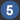
<style>
.page{position:relative;width:20px;height:20px;background:#3b5f97}
.page>*{position:absolute;margin:0}
.t1{font:14px "Arial-BoldMT";letter-spacing:0.025em;color:#fcfdfd}
</style>
<div class="page">
<p class="t1" style="left:6px;top:5px;width:7px;height:11px">5</p>
</div>
